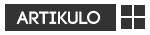
<style>
.page{position:relative;width:150px;height:35px;background:#333333}
.page>*{position:absolute;margin:0}
.t1{font:18px "Code-Pro-Demo";color:#ffffff}
</style>
<div class="page">
<p class="t1" style="left:16px;top:10px;width:85px;height:14px">ARTIKULO</p>
</div>
